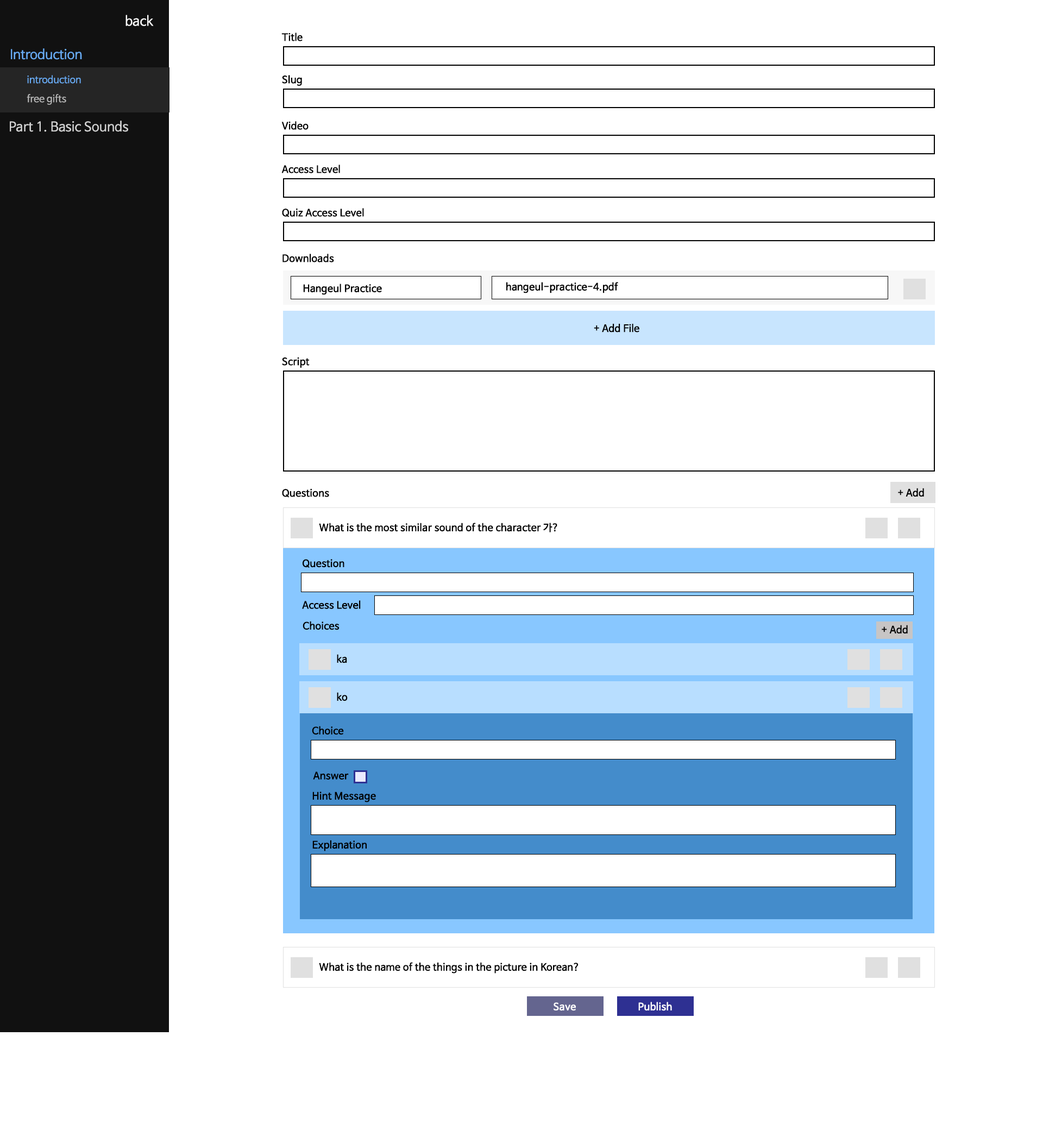
<style>
.page{position:relative;width:1043px;height:1143px;background:#ffffff}
.page>*{position:absolute;margin:0}
.t1{font:13px "NanumBarunGothic";color:#fefefe}
.t2{font:9.8px "NanumBarunGothic";color:#000000;font-weight:bold}
.t3{font:13px "NanumBarunGothic";color:#69abf3}
.t4{font:9.8px "NanumBarunGothic";color:#69abf3}
.t5{font:9.8px "NanumBarunGothic";color:#b8b8b8}
.t6{font:13px "NanumBarunGothic";color:#d3d3d3}
.t7{font:9.8px "NanumBarunGothic";color:#ffffff;font-weight:bold}
</style>
<div class="page">
<p class="t1" style="left:126px;top:15px;width:28px;height:11px">back</p>
<p class="t2" style="left:281px;top:33px;width:22px;height:8px">Title</p>
<p class="t3" style="left:11px;top:48px;width:71px;height:12px">Introduction</p>
<p class="t4" style="left:27px;top:75px;width:54px;height:9px">introduction</p>
<p class="t2" style="left:282px;top:75px;width:20px;height:11px">Slug</p>
<p class="t5" style="left:27px;top:94px;width:39px;height:11px">free gifts</p>
<p class="t6" style="left:10px;top:121px;width:118px;height:11px">Part 1. Basic Sounds</p>
<p class="t2" style="left:281px;top:121px;width:28px;height:9px">Video</p>
<p class="t2" style="left:281px;top:165px;width:59px;height:8px">Access Level</p>
<p class="t2" style="left:282px;top:208px;width:82px;height:9px">Quiz Access Level</p>
<p class="t2" style="left:283px;top:254px;width:51px;height:8px">Downloads</p>
<p class="t2" style="left:506px;top:282px;width:112px;height:11px">hangeul-practice-4.pdf</p>
<p class="t2" style="left:303px;top:284px;width:79px;height:11px">Hangeul Practice</p>
<p class="t2" style="left:594px;top:324px;width:45px;height:9px">+ Add File</p>
<p class="t2" style="left:282px;top:357px;width:28px;height:11px">Script</p>
<p class="t2" style="left:282px;top:488px;width:47px;height:10px">Questions</p>
<p class="t2" style="left:898px;top:488px;width:26px;height:9px">+ Add</p>
<p class="t2" style="left:319px;top:523px;width:238px;height:9px">What is the most similar sound of the character 가?</p>
<p class="t2" style="left:303px;top:559px;width:41px;height:9px">Question</p>
<p class="t2" style="left:302px;top:600px;width:59px;height:9px">Access Level</p>
<p class="t2" style="left:303px;top:621px;width:37px;height:9px">Choices</p>
<p class="t2" style="left:882px;top:625px;width:26px;height:9px">+ Add</p>
<p class="t2" style="left:337px;top:654px;width:10px;height:9px">ka</p>
<p class="t2" style="left:337px;top:692px;width:11px;height:9px">ko</p>
<p class="t2" style="left:312px;top:726px;width:32px;height:9px">Choice</p>
<p class="t2" style="left:313px;top:771px;width:36px;height:9px">Answer</p>
<p class="t2" style="left:312px;top:792px;width:64px;height:10px">Hint Message</p>
<p class="t2" style="left:312px;top:840px;width:55px;height:11px">Explanation</p>
<p class="t2" style="left:319px;top:962px;width:260px;height:12px">What is the name of the things in the picture in Korean?</p>
<p class="t7" style="left:638px;top:1002px;width:34px;height:9px">Publish</p>
<p class="t7" style="left:554px;top:1002px;width:22px;height:9px">Save</p>
</div>
